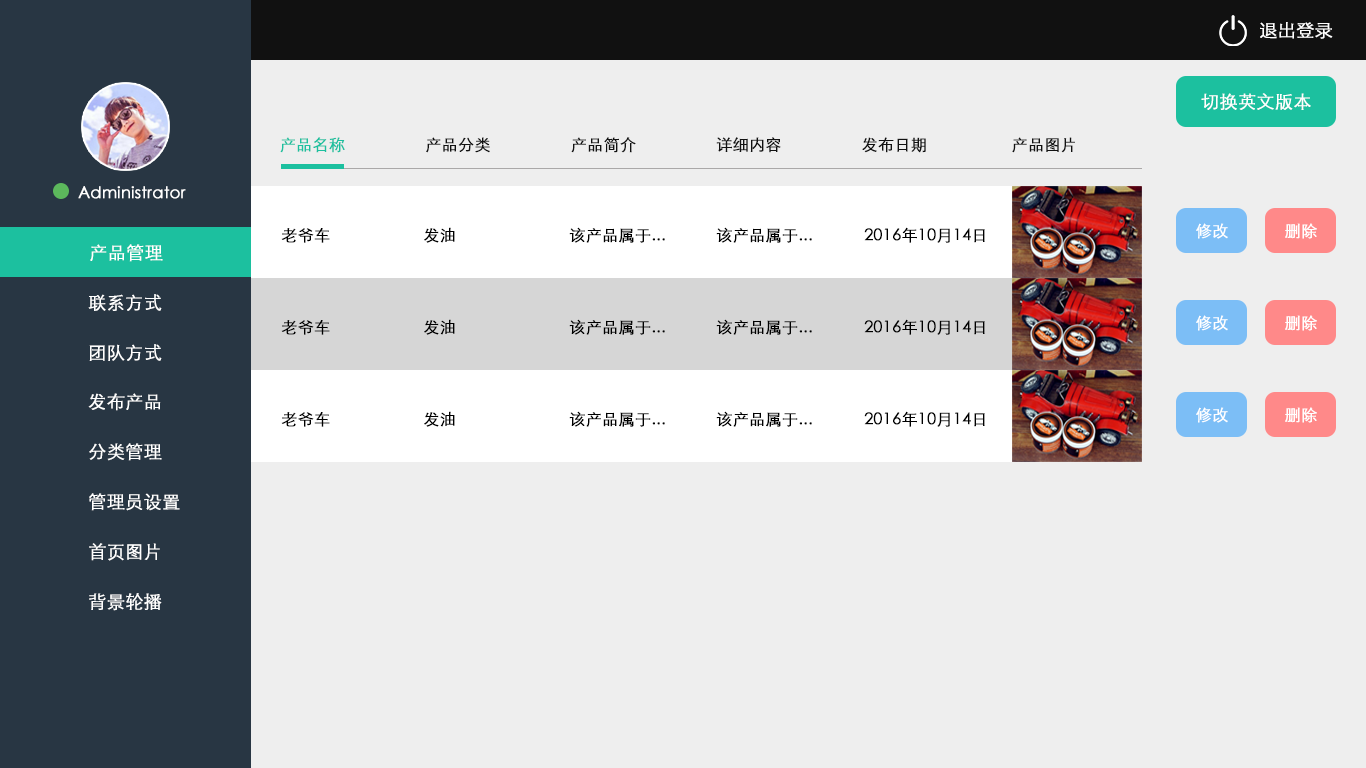
<style>
.page{position:relative;width:1366px;height:768px;background:#eeeeee}
.page>*{position:absolute;margin:0}
.t1{font:18px "STXihei";color:#ffffff;font-weight:bold}
.t2{font:16px "STXihei";color:#111111;font-weight:bold}
.t3{font:16px "STXihei";color:#1cc09f;font-weight:bold}
.t4{font:16px "STXihei";color:#ffffff;font-weight:bold}
.t5{font:16px "STXihei";color:#000000;font-weight:bold}
</style>
<div class="page">
<p class="t1" style="left:1260px;top:22px;width:73px;height:17px">退出登录</p>
<p class="t1" style="left:1201px;top:93px;width:110px;height:17px">切换英文版本</p>
<p class="t2" style="left:280px;top:137px;width:795px;height:16px"><span class="t3">产品名称                  </span>产品分类                  产品简介                  详细内容                  发布日期                   产品图片</p>
<p class="t4" style="left:78px;top:186px;width:108px;height:13px">Administrator</p>
<p class="t5" style="left:281px;top:227px;width:174px;height:16px">老爷车                     发油</p>
<p class="t5" style="left:569px;top:227px;width:96px;height:16px">该产品属于...</p>
<p class="t5" style="left:716px;top:227px;width:96px;height:16px">该产品属于...</p>
<p class="t5" style="left:864px;top:227px;width:121px;height:16px">2016年10月14日</p>
<p class="t4" style="left:1196px;top:223px;width:32px;height:16px">修改</p>
<p class="t4" style="left:1285px;top:223px;width:32px;height:16px">删除</p>
<p class="t1" style="left:90px;top:244px;width:73px;height:18px">产品管理</p>
<p class="t1" style="left:88px;top:294px;width:74px;height:17px">联系方式</p>
<p class="t4" style="left:1196px;top:315px;width:32px;height:16px">修改</p>
<p class="t4" style="left:1285px;top:315px;width:32px;height:16px">删除</p>
<p class="t5" style="left:281px;top:319px;width:174px;height:16px">老爷车                     发油</p>
<p class="t5" style="left:569px;top:319px;width:96px;height:16px">该产品属于...</p>
<p class="t5" style="left:716px;top:319px;width:96px;height:16px">该产品属于...</p>
<p class="t5" style="left:864px;top:319px;width:121px;height:16px">2016年10月14日</p>
<p class="t1" style="left:89px;top:344px;width:73px;height:17px">团队方式</p>
<p class="t1" style="left:88px;top:393px;width:73px;height:18px">发布产品</p>
<p class="t5" style="left:281px;top:411px;width:174px;height:16px">老爷车                     发油</p>
<p class="t5" style="left:569px;top:411px;width:96px;height:16px">该产品属于...</p>
<p class="t5" style="left:716px;top:411px;width:96px;height:16px">该产品属于...</p>
<p class="t5" style="left:864px;top:411px;width:121px;height:16px">2016年10月14日</p>
<p class="t4" style="left:1196px;top:407px;width:32px;height:16px">修改</p>
<p class="t4" style="left:1285px;top:407px;width:32px;height:16px">删除</p>
<p class="t1" style="left:89px;top:443px;width:73px;height:18px">分类管理</p>
<p class="t1" style="left:89px;top:493px;width:91px;height:18px">管理员设置</p>
<p class="t1" style="left:89px;top:543px;width:71px;height:18px">首页图片</p>
<p class="t1" style="left:89px;top:593px;width:73px;height:18px">背景轮播</p>
</div>
